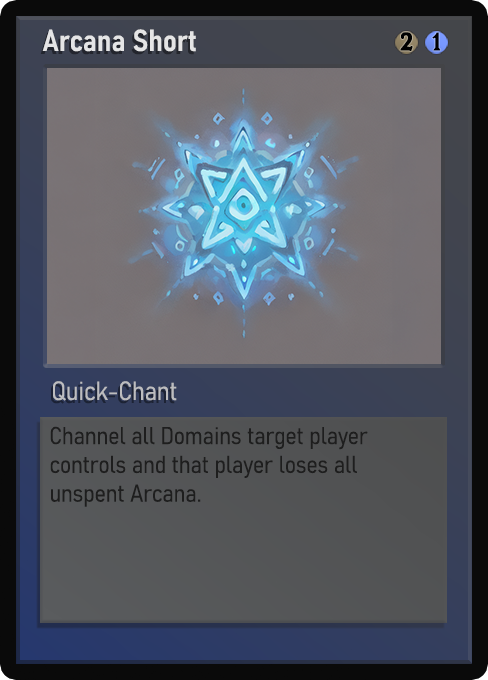
<style>
.page{position:relative;width:488px;height:680px}
.page>*{position:absolute;margin:0}
.t1{font:30px "Bahnschrift-SemiBoldSemiCondensed";color:#f2f2f2;font-weight:bold}
.t2{font:25px "WTRRoycroft";color:#000000;font-weight:bold;scale:1.09 1}
.t3{font:26px "Bahnschrift-LightSemiCondensed";color:#c8c8c8;font-weight:bold}
.t4{font:24px "Bahnschrift-LightSemiCondensed";color:#1e1e1e;font-weight:bold}
</style>
<div class="page">
<p class="t1" style="left:42px;top:29px;width:154px;height:23px;opacity:0.9">Arcana Short</p>
<p class="t2" style="left:400px;top:32px;width:13px;height:19px">2</p>
<p class="t2" style="left:432px;top:32px;width:9px;height:19px">1</p>
<p class="t3" style="left:53px;top:381px;width:124px;height:20px;opacity:0.9">Quick-Chant</p>
<p class="t4" style="left:50px;top:426px;width:318px;height:81px">Channel all Domains target player controls and that player loses all unspent Arcana.</p>
</div>
